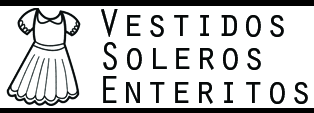
<style>
.page{position:relative;width:314px;height:113px;background:#ffffff}
.page>*{position:absolute;margin:0}
.t1{font:40px "OratorStd";color:#060808}
</style>
<div class="page">
<p class="t1" style="left:101px;top:9px;width:183px;height:28px">Vestidos</p>
<p class="t1" style="left:103px;top:42px;width:158px;height:28px">Soleros</p>
<p class="t1" style="left:103px;top:76px;width:205px;height:28px">Enteritos</p>
</div>
